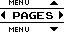
<style>
.page{position:relative;width:64px;height:32px;background:#ffffff}
.page>*{position:absolute;margin:0}
.t1{font:8px "04b03";color:#000000;scale:1.06 1}
.t2{font:14px "ArcadeClassic";color:#000000;scale:1.05 1}
</style>
<div class="page">
<p class="t1" style="left:9px;top:0px;width:20px;height:5px">MENU</p>
<p class="t2" style="left:13px;top:12px;width:40px;height:7px">PAGES</p>
<p class="t1" style="left:9px;top:27px;width:20px;height:5px">MENU</p>
</div>
